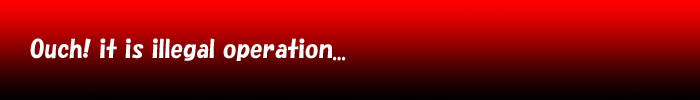
<style>
.page{position:relative;width:700px;height:100px}
.page>*{position:absolute;margin:0}
.t1{font:24px "HGPSoeiKakupoptai";color:#ffffff}
</style>
<div class="page">
<p class="t1" style="left:30px;top:38px;width:316px;height:23px">Ouch! it is illegal operation...</p>
</div>
